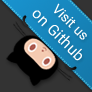
<style>
.page{position:relative;width:92px;height:92px;background:#333333}
.page>*{position:absolute;margin:0}
.t1{font:15px "Roboto-Light";color:#ffffff;font-weight:bold}
.t2{font:13px "Roboto-Light";color:#ffffff;font-weight:bold}
</style>
<div class="page">
<p class="t1" style="left:32px;top:3px;width:55px;height:58px;text-align:center;rotate:45deg"><span class="t2">Visit us<br></span>on Github</p>
</div>
